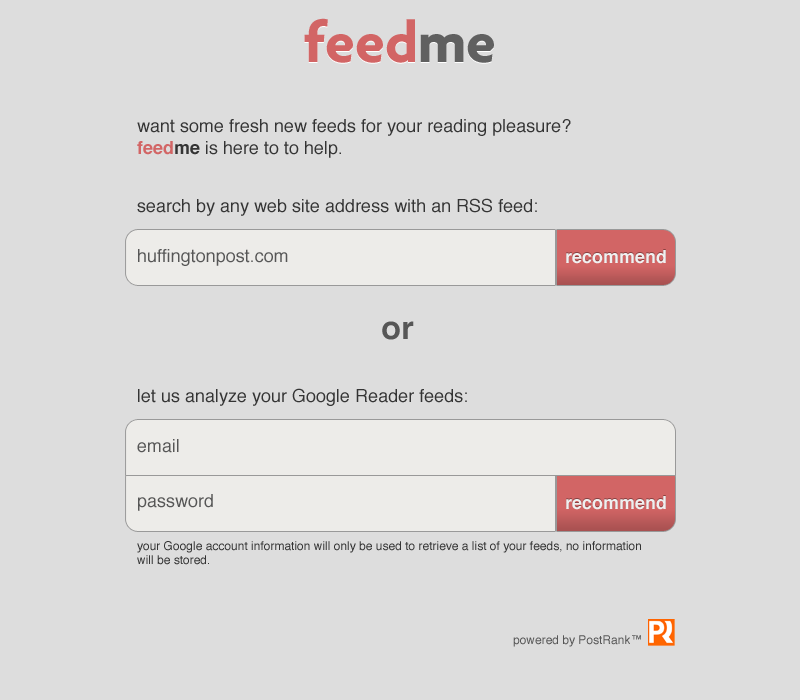
<style>
.page{position:relative;width:800px;height:700px;background:#dddddd}
.page>*{position:absolute;margin:0}
.t1{font:60px "Agenda-Bold";color:#d26565}
.t2{font:60px "Agenda-Bold";color:#606060}
.t3{font:18px "Helvetica";color:#343434}
.t4{font:18px "Helvetica-Bold";color:#d26565}
.t5{font:18px "Helvetica-Bold";color:#343434}
.t6{font:18px "Helvetica";color:#565656}
.t7{font:18px "Helvetica-Bold";color:#efefef}
.t8{font:32px "Helvetica-Bold";color:#565656}
.t9{font:12px "Helvetica";color:#343434}
.t10{font:12px "Helvetica";color:#565656}
</style>
<div class="page">
<p class="t1" style="left:304px;top:18px;width:190px;height:45px">feed<span class="t2">me</span></p>
<p class="t3" style="left:137px;top:119px;width:434px;height:39px">want some fresh new feeds for your reading pleasure?<br><span class="t4">feed</span><span class="t5">me</span> is here to to help.</p>
<p class="t3" style="left:137px;top:198px;width:400px;height:18px">search by any web site address with an RSS feed:</p>
<p class="t6" style="left:138px;top:249px;width:150px;height:17px">huffingtonpost.com</p>
<p class="t7" style="left:566px;top:250px;width:100px;height:14px">recommend</p>
<p class="t8" style="left:382px;top:321px;width:32px;height:19px">or</p>
<p class="t3" style="left:138px;top:388px;width:329px;height:18px">let us analyze your Google Reader feeds:</p>
<p class="t6" style="left:137px;top:439px;width:42px;height:14px">email</p>
<p class="t6" style="left:138px;top:494px;width:75px;height:17px">password</p>
<p class="t7" style="left:566px;top:496px;width:100px;height:14px">recommend</p>
<p class="t9" style="left:137px;top:541px;width:504px;height:24px">your Google account information will only be used to retrieve a list of your feeds, no information<br>will be stored.</p>
<p class="t10" style="left:513px;top:635px;width:128px;height:12px">powered by PostRank™</p>
</div>
